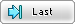
<style>
.page{position:relative;width:75px;height:24px}
.page>*{position:absolute;margin:0}
.t1{font:10px "Tahoma";letter-spacing:0.1em;color:#000000}
</style>
<div class="page">
<p class="t1" style="left:33px;top:8px;width:19px;height:7px">Last</p>
</div>
